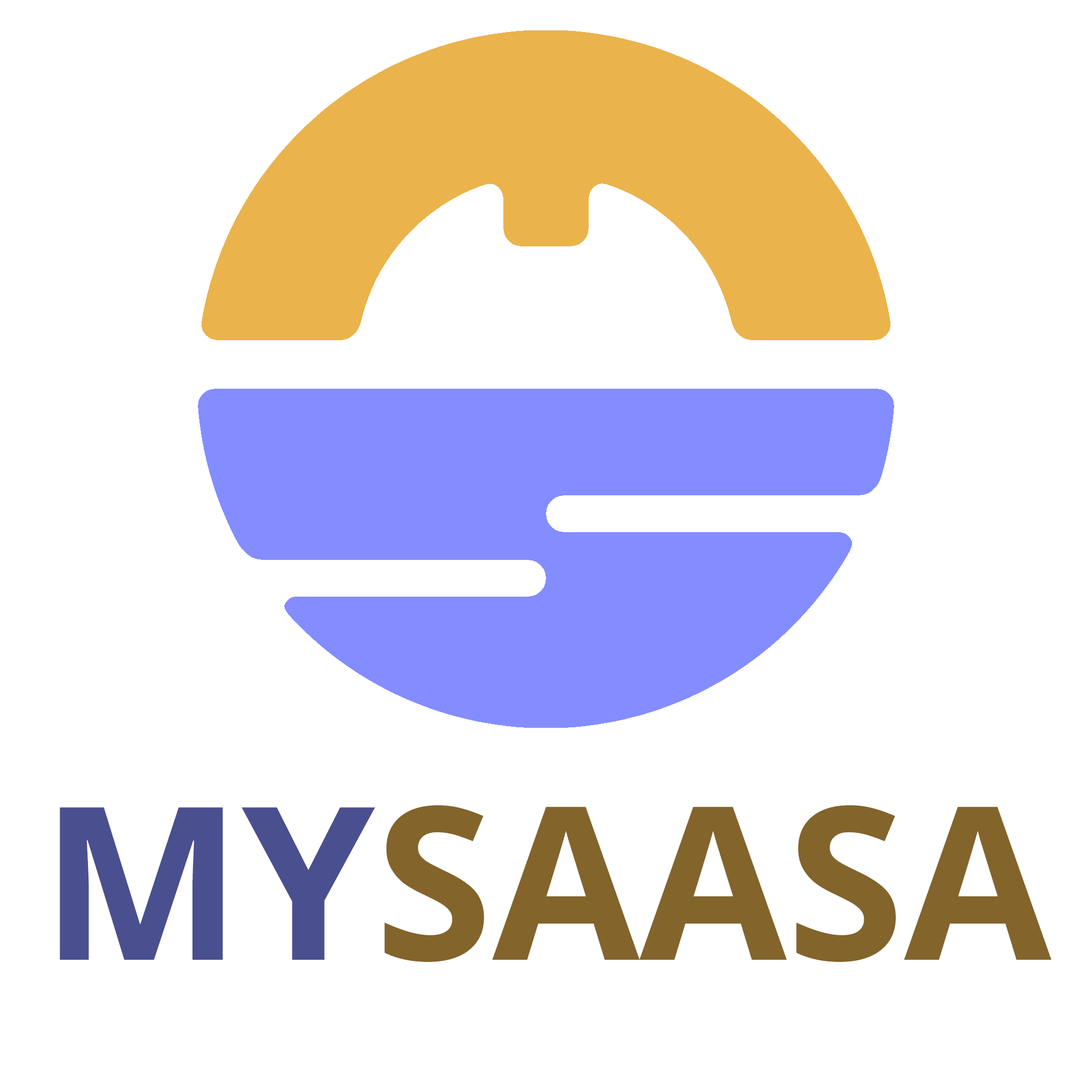
<style>
.page{position:relative;width:1092px;height:1092px;background:#ffffff}
.page>*{position:absolute;margin:0}
.t1{font:213.3px "OpenSans-Bold"}
</style>
<div class="page">
<p class="t1" style="left:60px;top:805px;width:991px;height:157px">MYSAASA</p>
</div>
